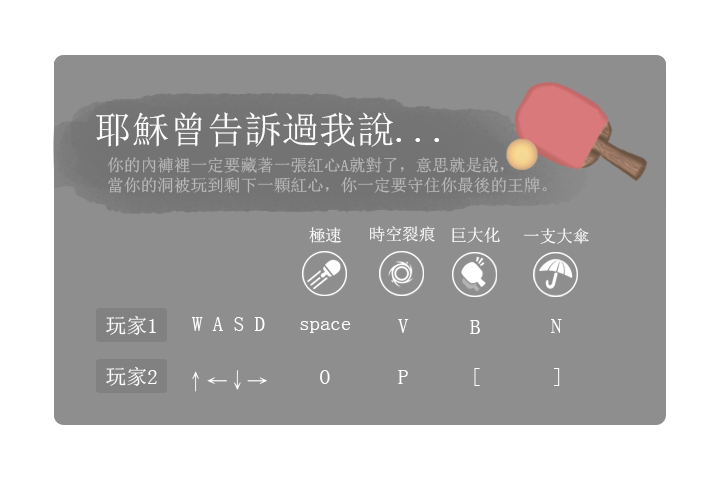
<style>
.page{position:relative;width:720px;height:480px;background:#8e8e8e}
.page>*{position:absolute;margin:0}
.t1{font:37.5px "SimSun";color:#ffffff}
.t2{font:16.7px/20.8px "SimSun";color:#bababa}
.t3{font:16.7px "SimSun";color:#fffefe}
.t4{font:16.6px "SimSun";color:#ffffff}
.t5{font:20.8px "SimSun";color:#fffefe}
.t6{font:20.9px "SimSun";color:#ffffff}
.t7{font:20.9px "SimSun";color:#fffefe}
.t8{font:20.8px "SimSun";color:#ffffff}
.t9{font:20.9px "DFKaiShu-SB-Estd-BF";color:#ffffff}
</style>
<div class="page">
<p class="t1" style="left:96px;top:112px;width:343px;height:35px">耶穌曾告訴過我說...</p>
<p class="t2" style="left:107px;top:157px;width:440px;height:36px">你的內褲裡一定要藏著一張紅心A就對了，意思就是說，<br>當你的洞被玩到剩下一顆紅心，你一定要守住你最後的王牌。</p>
<p class="t3" style="left:309px;top:227px;width:33px;height:16px">極速</p>
<p class="t3" style="left:370px;top:226px;width:65px;height:16px">時空裂痕</p>
<p class="t3" style="left:452px;top:227px;width:48px;height:16px">巨大化</p>
<p class="t4" style="left:524px;top:228px;width:65px;height:16px">一支大傘</p>
<p class="t5" style="left:106px;top:315px;width:50px;height:20px">玩家1</p>
<p class="t6" style="left:192px;top:317px;width:73px;height:14px">W A S D</p>
<p class="t7" style="left:300px;top:321px;width:51px;height:12px">space</p>
<p class="t7" style="left:398px;top:319px;width:11px;height:14px">V</p>
<p class="t7" style="left:470px;top:320px;width:10px;height:14px">B</p>
<p class="t8" style="left:551px;top:319px;width:11px;height:14px">N</p>
<p class="t5" style="left:106px;top:366px;width:51px;height:20px">玩家2</p>
<p class="t9" style="left:192px;top:370px;width:75px;height:22px">↑←↓→</p>
<p class="t7" style="left:320px;top:370px;width:10px;height:14px">O</p>
<p class="t7" style="left:398px;top:370px;width:10px;height:14px">P</p>
<p class="t7" style="left:474px;top:368px;width:6px;height:18px">[</p>
<p class="t8" style="left:554px;top:368px;width:6px;height:18px">]</p>
</div>
